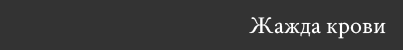
<style>
.page{position:relative;width:403px;height:50px;background:#333333}
.page>*{position:absolute;margin:0}
.t1{font:24px "CrimsonText-Regular";color:#ffffff}
</style>
<div class="page">
<p class="t1" style="left:249px;top:17px;width:137px;height:22px">Жажда крови</p>
</div>
